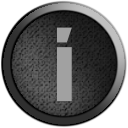
<style>
.page{position:relative;width:128px;height:128px;background:#ffffff}
.page>*{position:absolute;margin:0}
.t1{font:100.1px "UTM-Akashi";letter-spacing:0.05em;color:#a1a1a1}
</style>
<div class="page">
<p class="t1" style="left:57px;top:27px;width:15px;height:74px">i</p>
</div>
